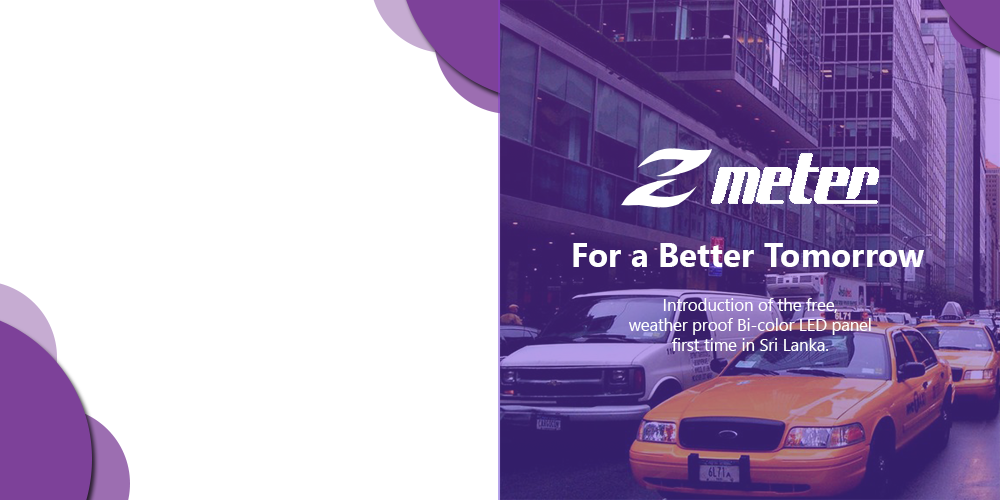
<style>
.page{position:relative;width:1000px;height:500px;background:#ffffff}
.page>*{position:absolute;margin:0}
.t1{font:33.3px "SegoeUI-Bold";color:#ffffff}
.t2{font:16.7px "SegoeUI";color:#ffffff}
</style>
<div class="page">
<p class="t1" style="left:573px;top:243px;width:351px;height:24px">For a Better Tomorrow</p>
<p class="t2" style="left:629px;top:298px;width:242px;height:53px;text-align:center">Introduction of the free,<br>weather proof Bi-color LED panel<br>first time in Sri Lanka.</p>
</div>
